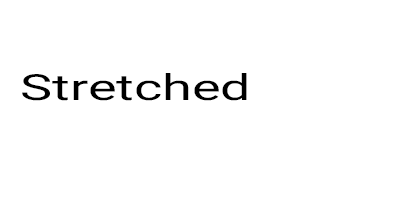
<style>
.page{position:relative;width:400px;height:200px;background:#ffffff}
.page>*{position:absolute;margin:0}
.t1{font:36px "Roboto-Regular";color:#000000;scale:1.5 1}
</style>
<div class="page">
<p class="t1" style="left:22px;top:73px;width:225px;height:28px">Stretched</p>
</div>
